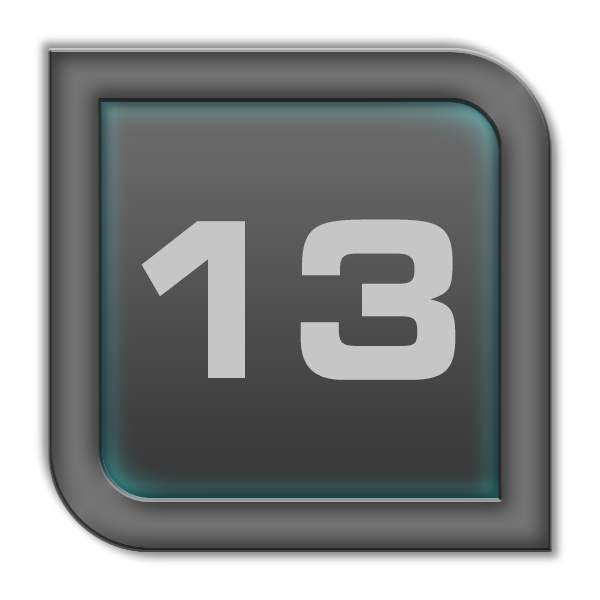
<style>
.page{position:relative;width:600px;height:600px;background:#ffffff}
.page>*{position:absolute;margin:0}
.t1{font:216px "EurostileLTStd-BoldEx2";color:#c6c6c6;scale:0.83 1}
</style>
<div class="page">
<p class="t1" style="left:141px;top:219px;width:315px;height:161px">13</p>
</div>
